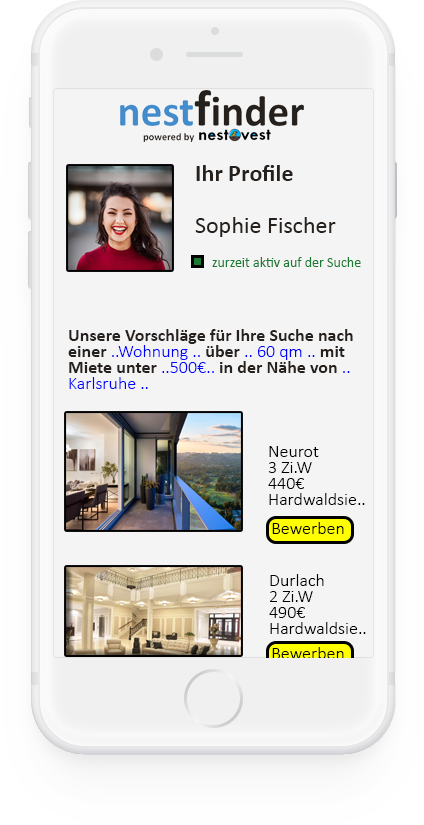
<style>
.page{position:relative;width:424px;height:825px;background:#f4f4f5}
.page>*{position:absolute;margin:0}
.t1{font:24px "Calibri-Bold";color:#26211d}
.t2{font:24px "Calibri";color:#26211d}
.t3{font:14px "Calibri";color:#197b30}
.t4{font:18px/16px "Calibri-Bold";color:#26211d}
.t5{font:18px/16px "Calibri-Light";color:#0000ff}
.t6{font:18px/16px "Calibri-Light";color:#000000}
.t7{font:18px "Calibri-Light";color:#000000}
</style>
<div class="page">
<p class="t1" style="left:196px;top:165px;width:97px;height:16px">Ihr Profile</p>
<p class="t2" style="left:195px;top:217px;width:141px;height:20px">Sophie Fischer</p>
<p class="t3" style="left:212px;top:257px;width:149px;height:10px">zurzeit aktiv auf der Suche</p>
<p class="t4" style="left:68px;top:329px;width:285px;height:60px">Unsere Vorschläge für Ihre Suche nach<br>einer <span class="t5">..Wohnung .. </span>über<span class="t5"> .. 60 qm .. </span>mit<br>Miete unter <span class="t5">..500€.. </span>in der Nähe von <span class="t5">..<br>Karlsruhe ..</span></p>
<p class="t6" style="left:268px;top:446px;width:97px;height:59px">Neurot<br>3 Zi.W<br>440€<br>Hardwaldsie..</p>
<p class="t7" style="left:272px;top:522px;width:72px;height:12px">Bewerben</p>
<p class="t6" style="left:269px;top:574px;width:97px;height:60px">Durlach<br>2 Zi.W<br>490€<br>Hardwaldsie..</p>
</div>
